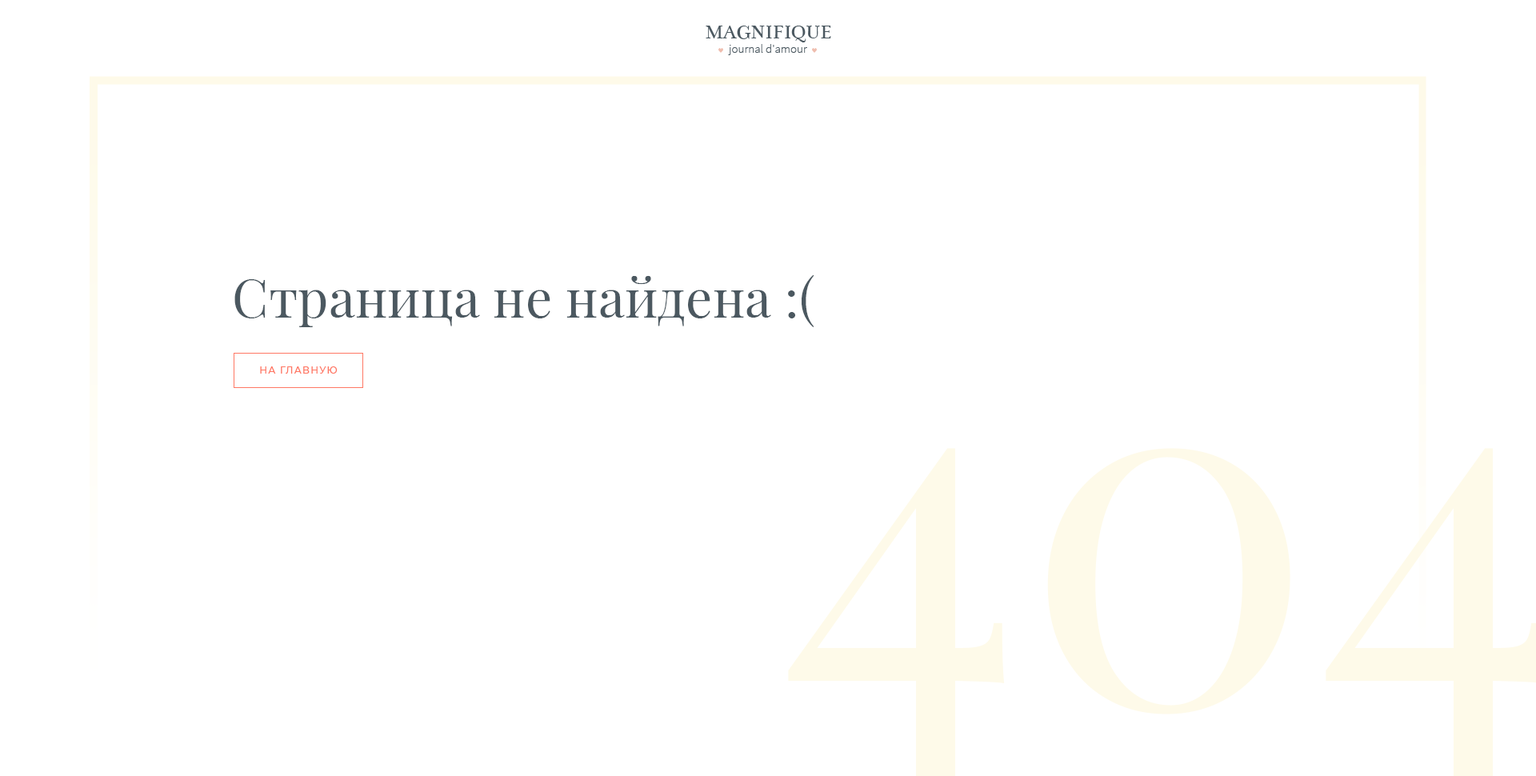
<style>
.page{position:relative;width:1536px;height:776px;background:#ffffff}
.page>*{position:absolute;margin:0}
.t1{font:52.8px "PlayfairDisplay-Regular";letter-spacing:0.003em;color:#4b5860}
.t2{font:9.6px "Montserrat-Medium";letter-spacing:0.1em;color:#ff7864;text-transform:uppercase}
</style>
<div class="page">
<p class="t1" style="left:234px;top:274px;width:581px;height:53px">Cтраница не найдена :(</p>
<p class="t2" style="left:260px;top:366px;width:78px;height:8px">на главную</p>
</div>
